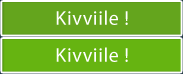
<style>
.page{position:relative;width:183px;height:74px;background:#66b411}
.page>*{position:absolute;margin:0}
.t1{font:20px "MyriadPro-Regular";letter-spacing:0.03em;color:#ffffff}
</style>
<div class="page">
<p class="t1" style="left:56px;top:10px;width:72px;height:15px">Kivviile !</p>
<p class="t1" style="left:56px;top:47px;width:72px;height:15px">Kivviile !</p>
</div>
